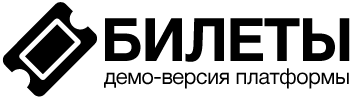
<style>
.page{position:relative;width:360px;height:100px;background:#ffffff}
.page>*{position:absolute;margin:0}
.t1{font:60px "HelveticaNeueCyr-Bold";letter-spacing:-0.025em;color:#000000;text-transform:uppercase}
.t2{font:22px "HelveticaNeueCyr-Roman";letter-spacing:-0.03em;color:#000000}
</style>
<div class="page">
<p class="t1" style="left:105px;top:18px;width:245px;height:44px">Билеты</p>
<p class="t2" style="left:104px;top:68px;width:245px;height:21px">демо-версия платформы</p>
</div>
